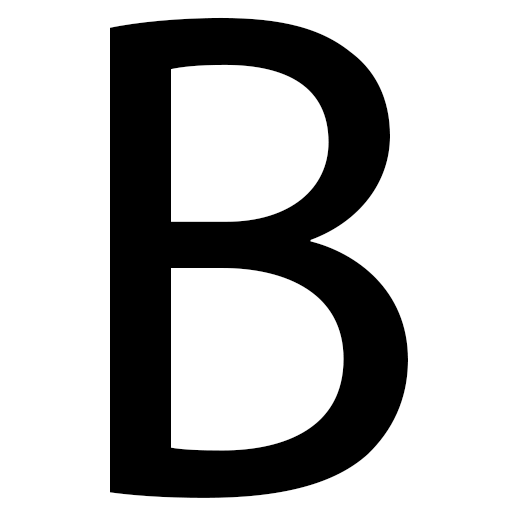
<style>
.page{position:relative;width:512px;height:512px;background:#ffffff}
.page>*{position:absolute;margin:0}
.t1{font:700px "MyriadPro-Regular";letter-spacing:0.025em;color:#000000}
</style>
<div class="page">
<p class="t1" style="left:110px;top:17px;width:298px;height:481px">B</p>
</div>
